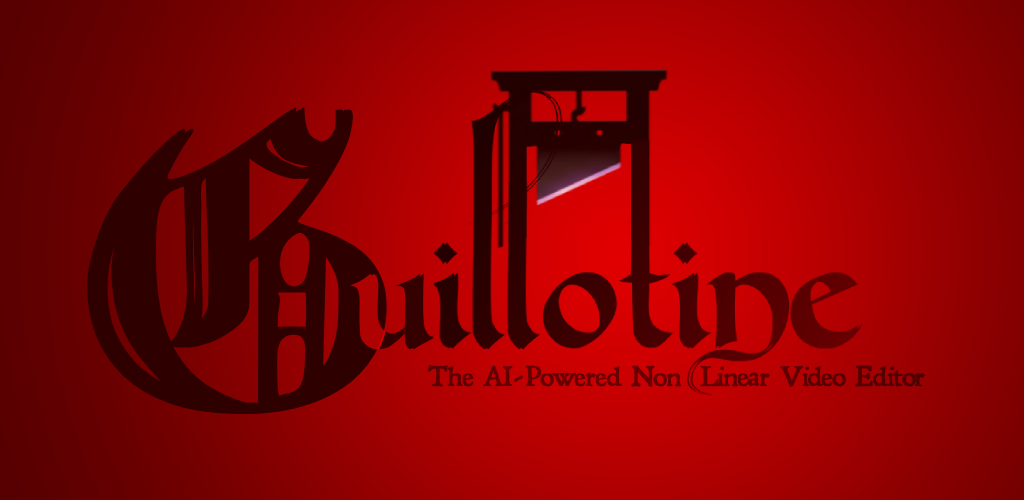
<style>
.page{position:relative;width:1024px;height:500px}
.page>*{position:absolute;margin:0}
.t1{font:342.6px "IncisedBlackWide-Normal";letter-spacing:-0.092em;color:#2f0000;font-weight:bold;scale:0.92 1}
.t2{font:339.4px "IncisedBlackWide-Normal";letter-spacing:-0.092em;color:#2f0000;font-weight:bold;scale:0.92 1}
.t3{font:27.1px "Leander";letter-spacing:-0.087em;color:#610001;font-weight:bold}
</style>
<div class="page">
<p class="t1" style="left:85px;top:105px;width:304px;height:310px">G</p>
<p class="t2" style="left:86px;top:107px;width:301px;height:307px">G</p>
<p class="t3" style="left:427px;top:365px;width:498px;height:22px">The AI-Powered Non  Linear Video Editor</p>
</div>
